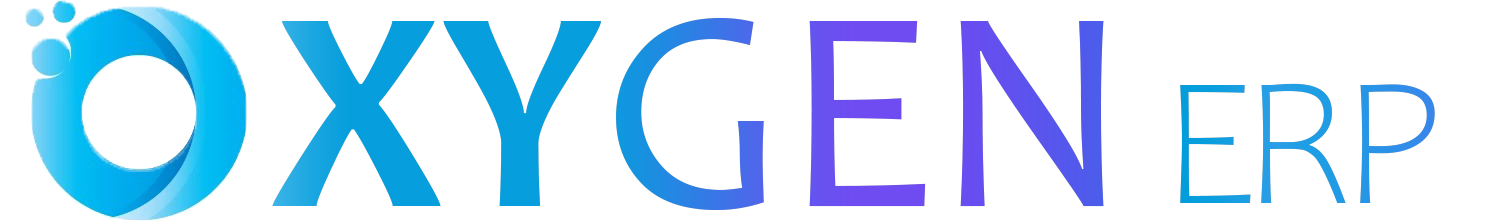
<style>
.page{position:relative;width:1490px;height:222px;background:#ffffff}
.page>*{position:absolute;margin:0}
.t1{font:290.5px "Candara"}
.t2{font:290.5px "Candara-Bold"}
.t3{font:186.3px "Candara-Light";letter-spacing:-0.08em;color:#219de5}
</style>
<div class="page">
<p class="t1" style="left:272px;top:18px;width:832px;height:192px"><span class="t2">XY</span>GEN</p>
<p class="t3" style="left:1180px;top:83px;width:255px;height:120px">ERP</p>
</div>
